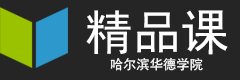
<style>
.page{position:relative;width:240px;height:80px;background:#252525}
.page>*{position:absolute;margin:0}
.t1{font:48px "SimHei";color:#ffffff}
.t2{font:13.3px "SimHei";color:#ffffff}
</style>
<div class="page">
<p class="t1" style="left:86px;top:10px;width:142px;height:45px">精品课</p>
<p class="t2" style="left:110px;top:57px;width:93px;height:14px">哈尔滨华德学院</p>
</div>
